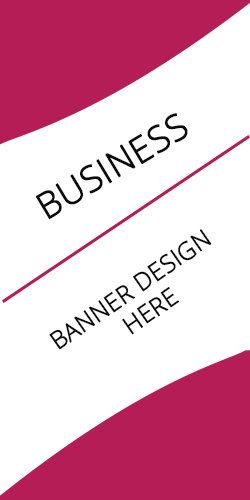
<style>
.page{position:relative;width:250px;height:500px;background:#ffffff}
.page>*{position:absolute;margin:0}
.t1{font:36px "OpenSans-Light";color:#0c0a0a;font-weight:bold}
.t2{font:24px "OpenSans-Light";color:#0c0a0a;font-weight:bold}
</style>
<div class="page">
<p class="t1" style="left:36px;top:113px;width:152px;height:107px;rotate:-31deg">BUSINESS</p>
<p class="t2" style="left:49px;top:229px;width:163px;height:121px;rotate:-35deg">BANNER DESIGN<br>          HERE</p>
</div>
